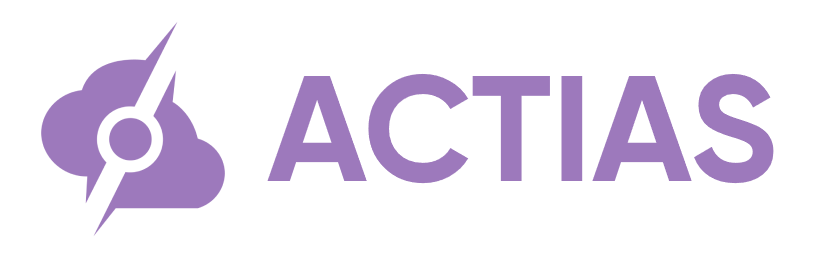
<style>
.page{position:relative;width:816px;height:258px;background:#ffffff}
.page>*{position:absolute;margin:0}
.t1{font:150px "Gilroy-Bold";color:#9d79bc}
</style>
<div class="page">
<p class="t1" style="left:267px;top:73px;width:507px;height:111px">ACTIAS</p>
</div>
